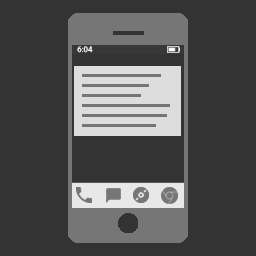
<style>
.page{position:relative;width:256px;height:256px;background:#333333}
.page>*{position:absolute;margin:0}
.t1{font:7.8px "Roboto-Regular";color:#ffffff}
</style>
<div class="page">
<p class="t1" style="left:77px;top:46px;width:16px;height:7px">6:04</p>
</div>
